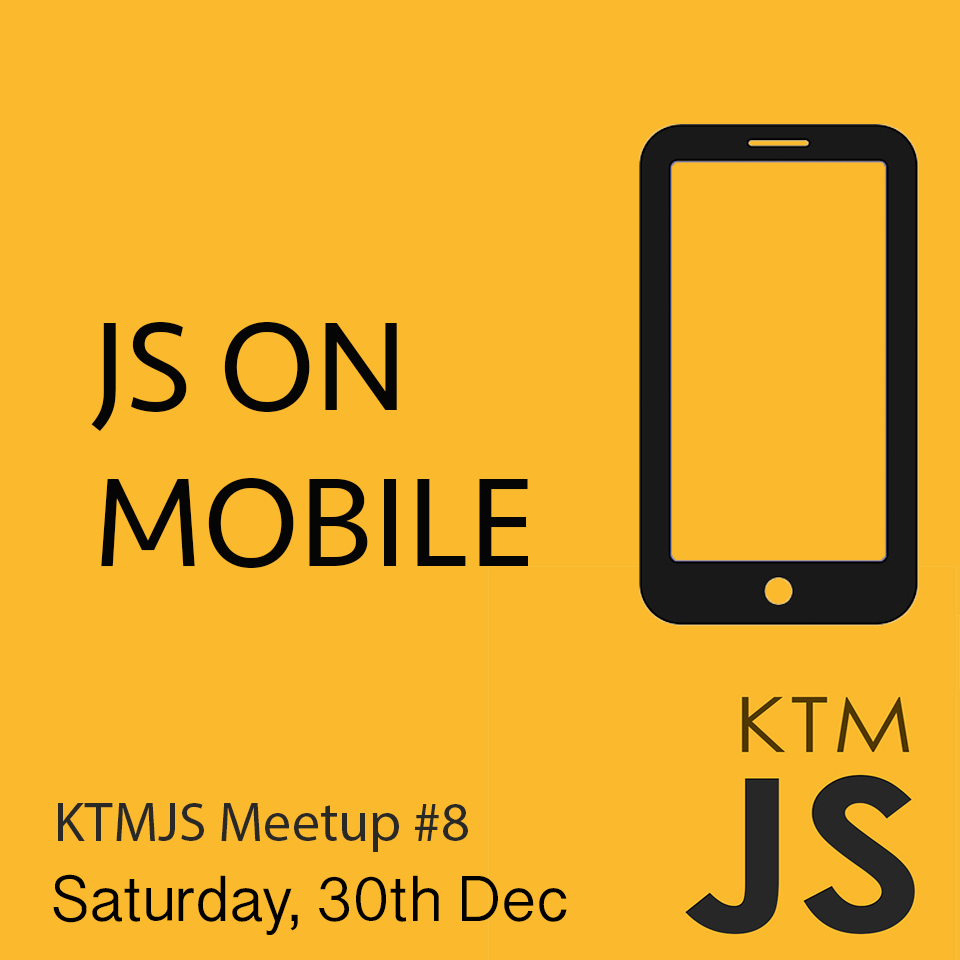
<style>
.page{position:relative;width:960px;height:960px;background:#fbb92d}
.page>*{position:absolute;margin:0}
.t1{font:130px "Seravek";color:#050505}
.t2{font:56px "MyriadPro-Regular";color:#292928}
.t3{font:65px "TamilSangamMN";color:#000000}
</style>
<div class="page">
<p class="t1" style="left:91px;top:322px;width:437px;height:246px">JS ON <br>MOBILE</p>
<p class="t2" style="left:58px;top:803px;width:410px;height:49px">KTMJS Meetup #8</p>
<p class="t3" style="left:53px;top:874px;width:514px;height:61px">Saturday, 30th Dec</p>
</div>
